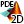
<style>
.page{position:relative;width:24px;height:24px;background:#ffffff}
.page>*{position:absolute;margin:0}
.t1{font:8px "MyriadPro-Regular";color:#000000}
.t2{font:11px "MyriadPro-Regular";color:#000000}
</style>
<div class="page">
<p class="t1" style="left:0px;top:1px;width:14px;height:6px">PDE</p>
<p class="t2" style="left:11px;top:15px;width:13px;height:8px">2D</p>
</div>
